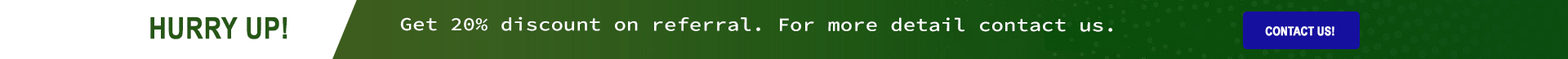
<style>
.page{position:relative;width:1568px;height:59px;background:#ffffff}
.page>*{position:absolute;margin:0}
.t1{font:29.6px "ArialNarrow-Bold";color:#265716;font-weight:bold}
.t2{font:18.6px "SourceCodeRoman-Medium";color:#fefffe;font-weight:bold;scale:1.13 1}
.t3{font:11.8px "ArialNarrow-Bold";color:#fefeff;font-weight:bold}
</style>
<div class="page">
<p class="t1" style="left:150px;top:17px;width:137px;height:22px">HURRY UP!</p>
<p class="t2" style="left:400px;top:16px;width:712px;height:16px">Get 20% discount on referral. For more detail contact us.</p>
<p class="t3" style="left:1265px;top:26px;width:69px;height:10px">CONTACT US!</p>
</div>
